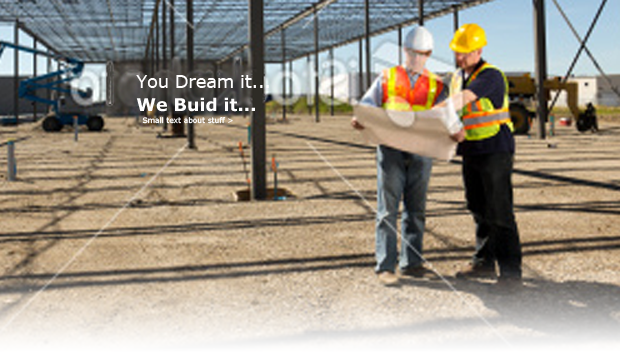
<style>
.page{position:relative;width:620px;height:353px}
.page>*{position:absolute;margin:0}
.t1{font:17.5px "Verdana";color:#fffefe}
.t2{font:17.5px "Verdana-Bold";color:#fffefe}
.t3{font:7.5px "Verdana";color:#fffefe}
</style>
<div class="page">
<p class="t1" style="left:136px;top:75px;width:133px;height:13px">You Dream it...</p>
<p class="t2" style="left:136px;top:97px;width:119px;height:15px">We Buid it...</p>
<p class="t3" style="left:142px;top:117px;width:91px;height:7px">Small text about stuff &gt;</p>
</div>
